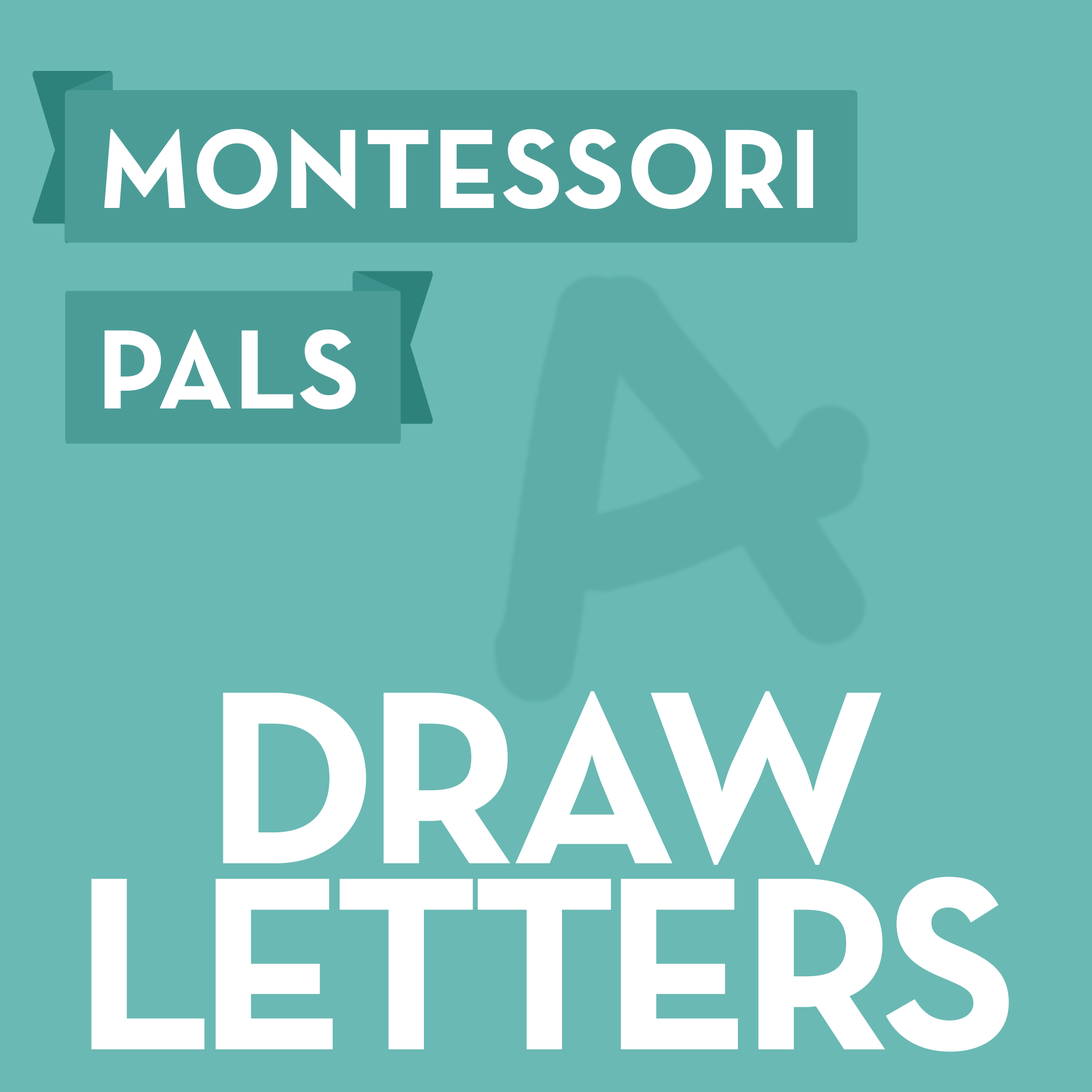
<style>
.page{position:relative;width:1092px;height:1092px;background:#6ab9b4}
.page>*{position:absolute;margin:0}
.t1{font:114.6px "NeutraTextTF-BoldSCAlt";letter-spacing:0.005em;color:#ffffff;text-transform:uppercase}
.t2{font:250.7px/186.4px "NeutraTextTF-BoldSCAlt";letter-spacing:-0.05em;color:#ffffff;text-transform:uppercase}
</style>
<div class="page">
<p class="t1" style="left:104px;top:129px;width:709px;height:80px">Montessori</p>
<p class="t1" style="left:105px;top:330px;width:251px;height:79px">PALS</p>
<p class="t2" style="left:91px;top:691px;width:918px;height:361px;text-align:center">DRAW<br>Letters</p>
</div>
